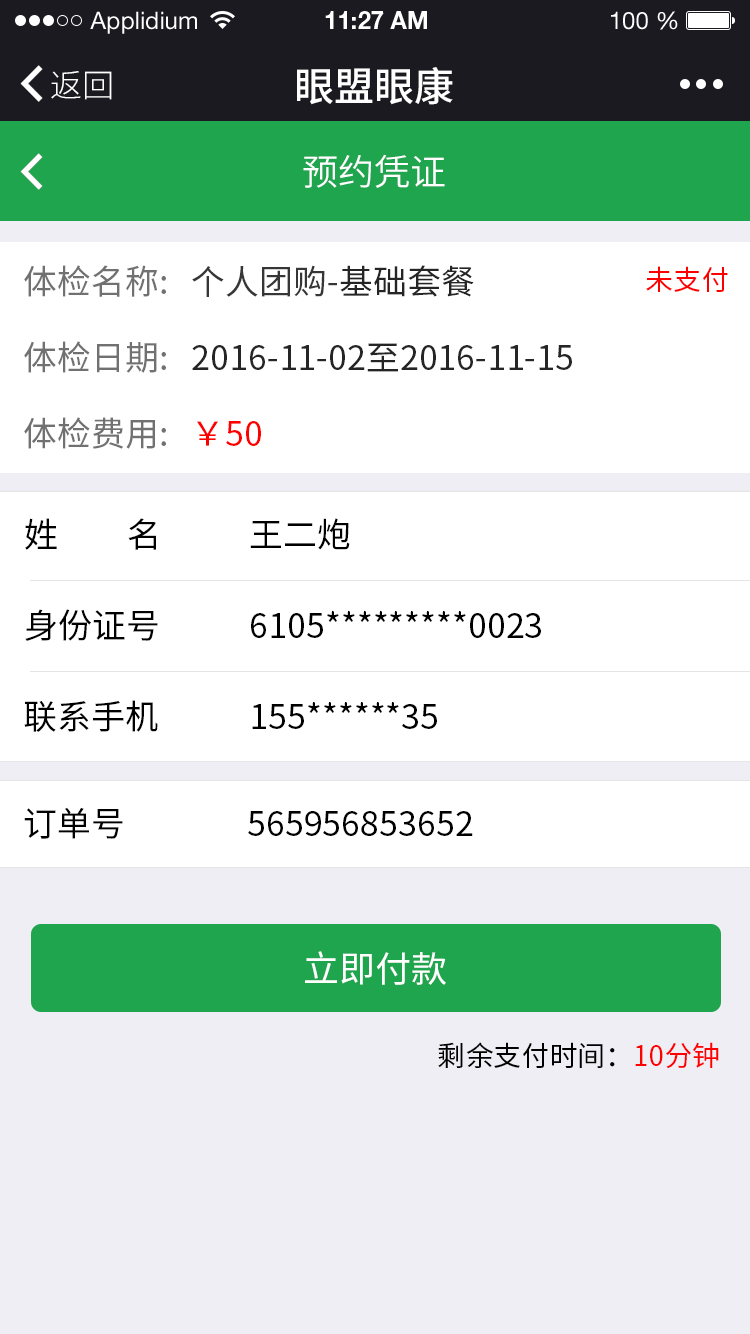
<style>
.page{position:relative;width:750px;height:1334px;background:#ffffff}
.page>*{position:absolute;margin:0}
.t1{font:24px "HelveticaNeueLTStd-Roman";color:#ffffff}
.t2{font:24px "HelveticaNeueLTStd-Bd";color:#ffffff}
.t3{font:32px "SourceHanSansCN-Light";color:#ffffff}
.t4{font:40px "SourceHanSansCN-Medium";color:#ffffff}
.t5{font:36px "SourceHanSansCN-Normal";color:#ffffff}
.t6{font:34px/80px "SourceHanSansCN-Regular";color:#252525}
.t7{font:34px/80px "SourceHanSansCN-Regular";color:#717171}
.t8{font:34px/80px "SourceHanSansCN-Regular";color:#363636}
.t9{font:34px/80px "SourceHanSansCN-Regular";color:#ff0000}
.t10{font:28px "SourceHanSansCN-Regular";color:#ff0000}
.t11{font:34.1px "SourceHanSansCN-Regular";color:#000000}
.t12{font:34px "SourceHanSansCN-Regular";color:#000000}
.t13{font:36px "SourceHanSansCN-Regular";color:#ffffff}
.t14{font:28px "SourceHanSansCN-Regular";color:#000000}
</style>
<div class="page">
<p class="t1" style="left:90px;top:11px;width:107px;height:23px">Applidium</p>
<p class="t2" style="left:325px;top:11px;width:102px;height:18px">11:27 AM</p>
<p class="t1" style="left:611px;top:11px;width:67px;height:19px">100 %</p>
<p class="t3" style="left:51px;top:71px;width:61px;height:29px">返回</p>
<p class="t4" style="left:297px;top:67px;width:156px;height:38px">眼盟眼康</p>
<p class="t5" style="left:303px;top:154px;width:142px;height:34px">预约凭证</p>
<p class="t6" style="left:24px;top:265px;width:548px;height:184px"><span class="t7">体检名称:   </span><span class="t8">个人团购-</span>基础套餐<br><span class="t7">体检日期:   </span>2016-11-02至2016-11-15<br><span class="t7">体检费用:   </span><span class="t9">￥50</span></p>
<p class="t10" style="left:646px;top:266px;width:82px;height:26px">未支付</p>
<p class="t11" style="left:25px;top:518px;width:131px;height:32px">姓         名</p>
<p class="t11" style="left:250px;top:518px;width:100px;height:32px">王二炮</p>
<p class="t11" style="left:25px;top:609px;width:133px;height:32px">身份证号</p>
<p class="t11" style="left:251px;top:611px;width:290px;height:27px">6105*********0023</p>
<p class="t11" style="left:24px;top:700px;width:134px;height:32px">联系手机</p>
<p class="t11" style="left:252px;top:702px;width:185px;height:27px">155******35</p>
<p class="t12" style="left:24px;top:807px;width:99px;height:32px">订单号</p>
<p class="t12" style="left:248px;top:811px;width:225px;height:25px">565956853652</p>
<p class="t13" style="left:305px;top:951px;width:141px;height:34px">立即付款</p>
<p class="t14" style="left:438px;top:1042px;width:281px;height:27px">剩余支付时间：<span class="t10">10分钟</span></p>
</div>
